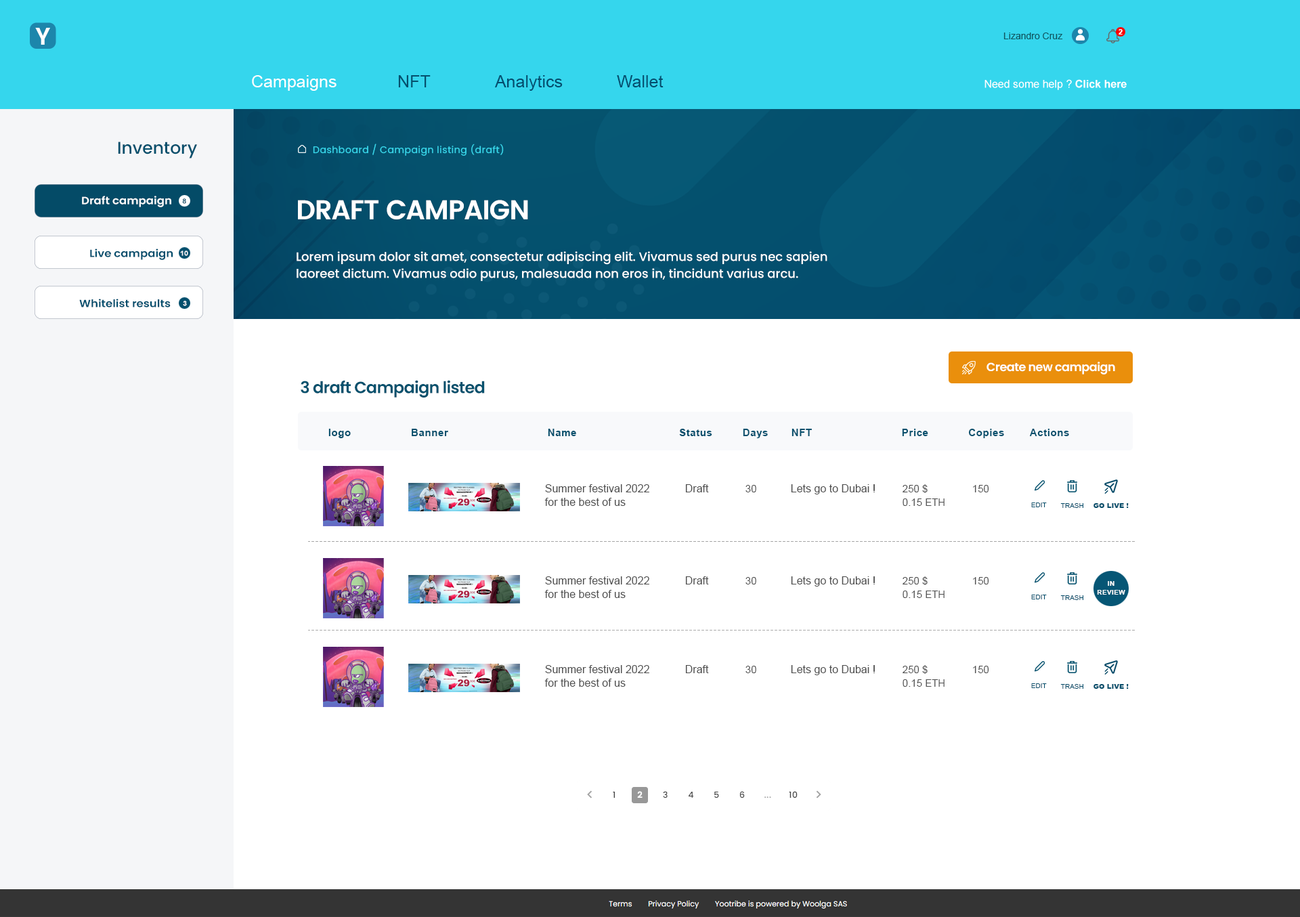
<style>
.page{position:relative;width:1300px;height:917px;background:#ffffff}
.page>*{position:absolute;margin:0}
.t1{font:23.7px "Poppins-SemiBold";color:#ffffff}
.t2{font:7.4px "Arial-BoldMT";color:#ffffff}
.t3{font:9.5px "ArialMT";color:#105761}
.t4{font:16.9px "ArialMT";color:#044d6e}
.t5{font:16.9px "ArialMT";color:#ffffff}
.t6{font:16.9px "ArialMT";color:#05506d}
.t7{font:10.8px "ArialMT";color:#ffffff}
.t8{font:10.8px "Arial-BoldMT";color:#ffffff}
.t9{font:16.9px "Poppins-Medium";color:#05506d}
.t10{font:9.5px "Poppins-Regular";letter-spacing:0.04em;color:#38d8ec}
.t11{font:10.5px "Poppins-SemiBold";color:#ffffff;scale:1.07 1}
.t12{font:6.8px "Arial-BoldMT";color:#044b67;scale:1.07 1}
.t13{font:6.8px "Poppins-SemiBold";color:#044b67;scale:1.07 1}
.t14{font:27.1px "Poppins-SemiBold";letter-spacing:-0.03em;color:#ffffff}
.t15{font:10.5px "Poppins-SemiBold";color:#044f6e;scale:1.07 1}
.t16{font:6.8px "Arial-BoldMT";color:#f8f9fb;scale:1.07 1}
.t17{font:12.2px/16.9px "Poppins-Medium";color:#ffffff}
.t18{font:11.9px "Poppins-SemiBold";letter-spacing:-0.03em;color:#ffffff}
.t19{font:16.3px "Poppins-SemiBold";letter-spacing:-0.03em;color:#05516d}
.t20{font:10.2px "Arial-BoldMT";letter-spacing:0.04em;color:#05506d}
.t21{font:10.8px/13.5px "ArialMT";color:#4e4e4e}
.t22{font:10.8px "ArialMT";color:#4e4e4e}
.t23{font:10.2px "ArialMT";color:#4e4e4e}
.t24{font:10.2px/13.5px "ArialMT";color:#4e4e4e}
.t25{font:6.8px "ArialMT";color:#044e6b}
.t26{font:6.8px "Arial-Black";color:#044e6b}
.t27{font:6.8px/8.8px "Arial-BoldMT";letter-spacing:0.04em;color:#ffffff}
</style>
<div class="page">
<p class="t1" style="left:35px;top:28px;width:15px;height:17px">Y</p>
<p class="t2" style="left:1119px;top:29px;width:4px;height:6px">2</p>
<p class="t3" style="left:1004px;top:33px;width:59px;height:6px">Lizandro Cruz</p>
<p class="t4" style="left:252px;top:75px;width:412px;height:16px"><span class="t5">Campaigns   </span><span class="t6">NFT</span>   Analytics   Wallet</p>
<p class="t7" style="left:985px;top:79px;width:142px;height:11px">Need some help ? <span class="t8">Click here</span></p>
<p class="t9" style="left:118px;top:142px;width:79px;height:16px">Inventory</p>
<p class="t10" style="left:313px;top:144px;width:191px;height:12px">Dashboard / Campaign listing (draft)</p>
<p class="t11" style="left:82px;top:196px;width:89px;height:11px">Draft campaign</p>
<p class="t12" style="left:182px;top:198px;width:4px;height:6px"><span class="t13"> </span>8</p>
<p class="t14" style="left:298px;top:200px;width:230px;height:19px">DRAFT CAMPAIGN</p>
<p class="t15" style="left:90px;top:249px;width:83px;height:11px">Live campaign</p>
<p class="t16" style="left:180px;top:251px;width:8px;height:5px">10</p>
<p class="t17" style="left:297px;top:251px;width:531px;height:30px">Lorem ipsum dolor sit amet, consectetur adipiscing elit. Vivamus sed purus nec sapien laoreet dictum. Vivamus odio purus, malesuada non eros in, tincidunt varius arcu.</p>
<p class="t15" style="left:79px;top:299px;width:92px;height:8px">Whitelist results</p>
<p class="t16" style="left:183px;top:301px;width:4px;height:5px">3</p>
<p class="t18" style="left:987px;top:362px;width:128px;height:13px">Create new campaign</p>
<p class="t19" style="left:301px;top:380px;width:184px;height:18px">3 draft Campaign listed</p>
<p class="t20" style="left:328px;top:429px;width:741px;height:9px">logo      Banner     Name       Status  Days NFT        Price      Copies       Actions</p>
<p class="t21" style="left:545px;top:484px;width:104px;height:22px">Summer festival 2022<br>for the best of us</p>
<p class="t22" style="left:685px;top:484px;width:24px;height:8px">Draft</p>
<p class="t23" style="left:746px;top:485px;width:11px;height:7px">30</p>
<p class="t22" style="left:791px;top:484px;width:84px;height:10px">Lets go to Dubai !</p>
<p class="t24" style="left:903px;top:484px;width:42px;height:22px">250 $<br>0.15 ETH</p>
<p class="t23" style="left:973px;top:485px;width:16px;height:7px">150</p>
<p class="t25" style="left:1031px;top:503px;width:16px;height:4px">EDIT</p>
<p class="t25" style="left:1061px;top:503px;width:23px;height:5px">TRASH</p>
<p class="t26" style="left:1094px;top:503px;width:35px;height:5px">GO LIVE !</p>
<p class="t27" style="left:1097px;top:581px;width:29px;height:14px;text-align:center">IN<br>REVIEW</p>
</div>
